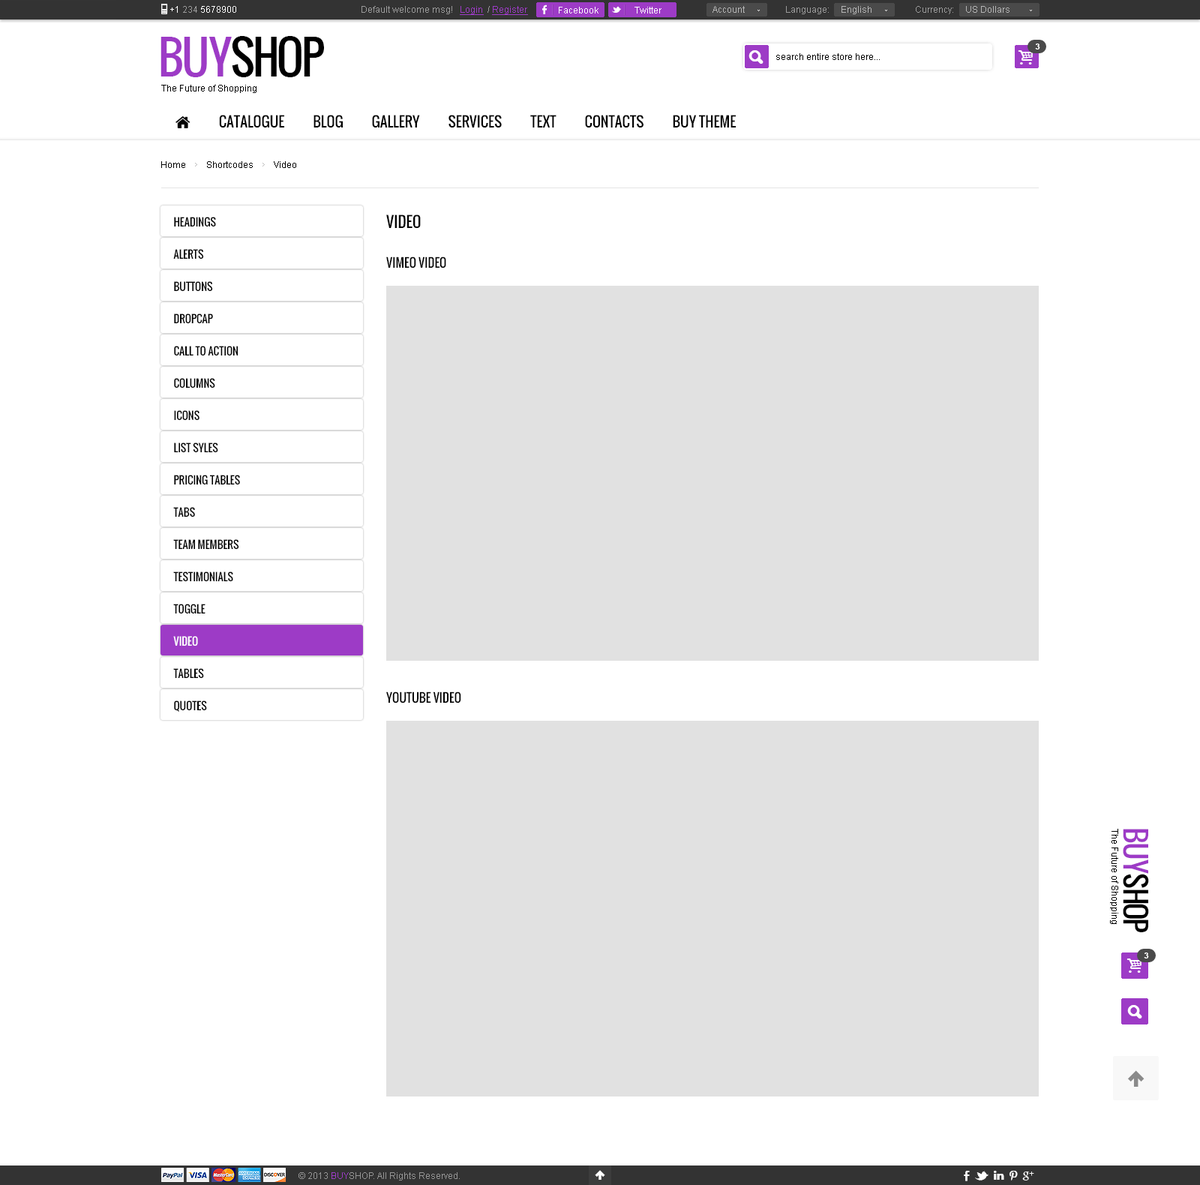
<style>
.page{position:relative;width:1200px;height:1185px;background:#ffffff}
.page>*{position:absolute;margin:0}
.t1{font:9px "ArialMT";color:#ffffff}
.t2{font:9px "ArialMT";color:#9b9b9b}
.t3{font:9px "ArialMT";color:#9d3bc6;text-decoration:underline}
.t4{font:9px "ArialMT";color:#b6b6b6}
.t5{font:45px "Oswald";letter-spacing:-0.06em;color:#000000;text-transform:uppercase}
.t6{font:45px "Oswald";letter-spacing:-0.06em;color:#9d3bc6;text-transform:uppercase}
.t7{font:9px "ArialMT";color:#000000}
.t8{font:8.2px "Arial-BoldMT";color:#ffffff;text-transform:uppercase}
.t9{font:10.5px/32.2px "Oswald";color:#000000;text-transform:uppercase}
.t10{font:10.5px/32.2px "Oswald";color:#ffffff;text-transform:uppercase}
.t11{font:15px "Oswald";color:#000000;text-transform:uppercase}
.t12{font:12px "Oswald";color:#000000;text-transform:uppercase}
.t13{font:28.5px "Oswald";letter-spacing:-0.06em;color:#000000;text-transform:uppercase}
.t14{font:28.5px "Oswald";letter-spacing:-0.06em;color:#9d3bc6;text-transform:uppercase}
.t15{font:9px "ArialMT";color:#959595}
.t16{font:9px "ArialMT";color:#9d3bc6}
</style>
<div class="page">
<p class="t1" style="left:170px;top:6px;width:66px;height:7px">+1 <span class="t2">234 </span>5678900</p>
<p class="t2" style="left:362px;top:6px;width:166px;height:9px">Default welcome msg!   <span class="t3">Login </span> / <span class="t3">Register</span></p>
<p class="t2" style="left:362px;top:6px;width:166px;height:9px">Default welcome msg!   <span class="t3">Login </span> / <span class="t3">Register</span></p>
<p class="t4" style="left:712px;top:6px;width:33px;height:7px">Account</p>
<p class="t2" style="left:786px;top:6px;width:86px;height:8px">Language:     <span class="t4">English</span></p>
<p class="t4" style="left:916px;top:6px;width:94px;height:8px"><span class="t2">Currency:     </span>US Dollars</p>
<p class="t1" style="left:559px;top:7px;width:39px;height:7px">Facebook</p>
<p class="t1" style="left:634px;top:7px;width:28px;height:7px">Twitter</p>
<p class="t5" style="left:160px;top:36px;width:164px;height:41px"><span class="t6">buy</span>shop</p>
<p class="t7" style="left:776px;top:53px;width:104px;height:7px">search entire store here...</p>
<p class="t8" style="left:1035px;top:44px;width:5px;height:6px">3</p>
<p class="t7" style="left:161px;top:85px;width:95px;height:8px">The Future of Shopping</p>
<p class="t7" style="left:161px;top:161px;width:135px;height:7px">Home         Shortcodes         Video</p>
<p class="t9" style="left:173px;top:217px;width:67px;height:495px">Headings<br>Alerts<br>Buttons<br>Dropcap<br>Call To Action<br>Columns<br>Icons<br>List syles<br>Pricing Tables<br>Tabs<br>Team Members<br>Testimonials<br>Toggle<br><span class="t10">Video<br></span>Tables<br>Quotes</p>
<p class="t11" style="left:386px;top:214px;width:35px;height:15px">Video</p>
<p class="t12" style="left:386px;top:256px;width:60px;height:12px">VIMEO VIDEO</p>
<p class="t12" style="left:386px;top:692px;width:75px;height:12px">YOUTUBE VIDEO</p>
<p class="t7" style="left:1110px;top:829px;width:8px;height:95px;rotate:90deg">The Future of Shopping</p>
<p class="t13" style="left:1123px;top:829px;width:26px;height:103px;rotate:90deg"><span class="t14">buy</span>shop</p>
<p class="t8" style="left:1144px;top:952px;width:5px;height:6px">3</p>
<p class="t15" style="left:298px;top:1172px;width:162px;height:8px">© 2013 <span class="t16">BUY</span>SHOP. All Rights Reserved.</p>
</div>
